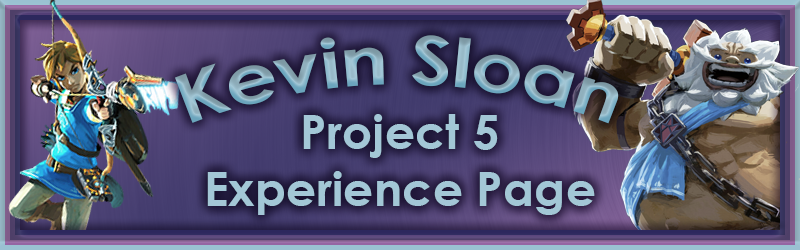
<style>
.page{position:relative;width:800px;height:250px}
.page>*{position:absolute;margin:0}
.t1{font:67.6px "CenturyGothic-Bold"}
.t2{font:47.5px "CenturyGothic-Bold";color:#a3c7d6}
</style>
<div class="page">
<p class="t1" style="left:175px;top:35px;width:444px;height:89px">Kevin Sloan</p>
<p class="t2" style="left:207px;top:114px;width:388px;height:101px;text-align:center">Project 5<br>Experience Page</p>
</div>
